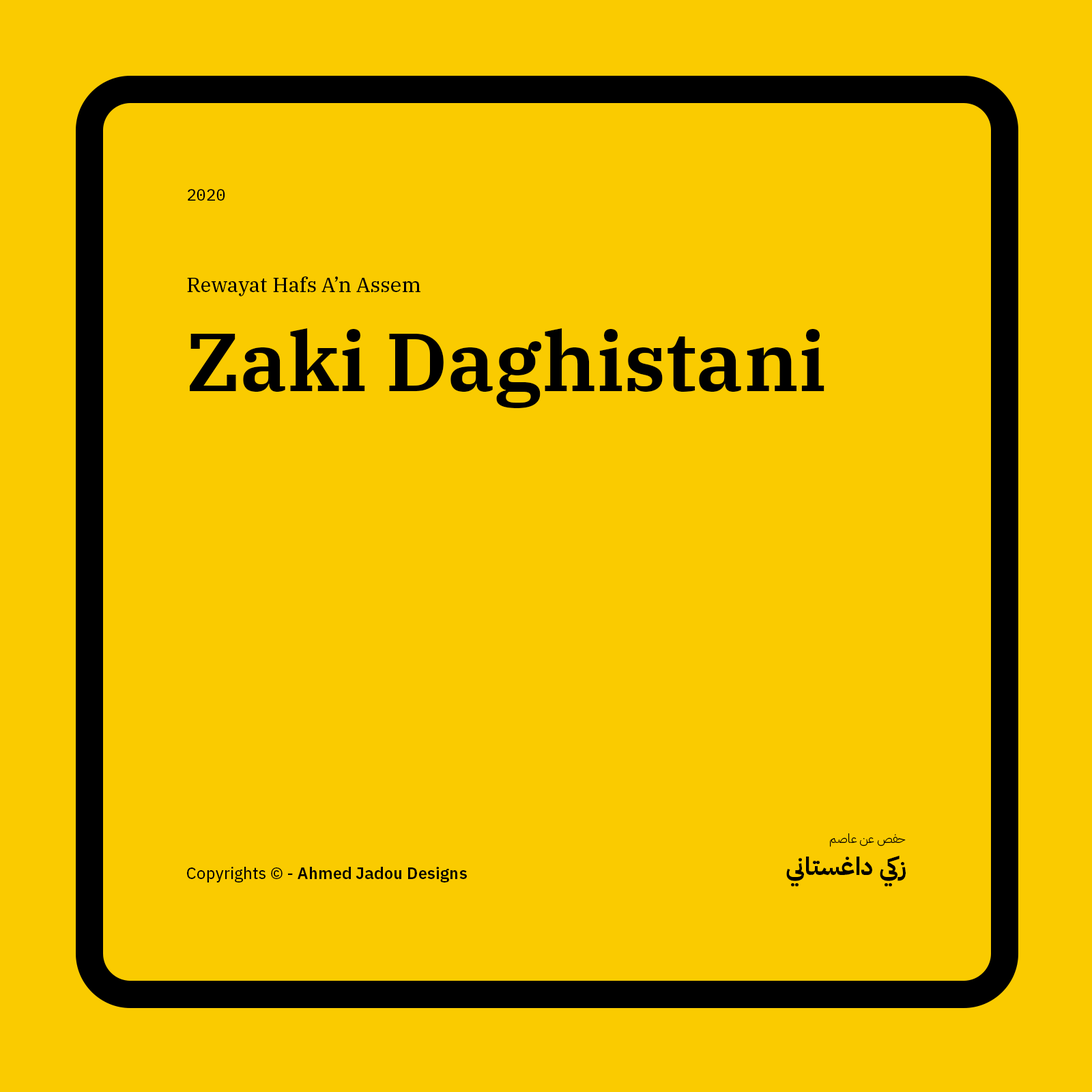
<style>
.page{position:relative;width:1092px;height:1092px;background:#facb00}
.page>*{position:absolute;margin:0}
.t1{font:16.4px "IBMPlexMono-Text";color:#000000}
.t2{font:20.5px "IBMPlexSerif-Text";color:#000000}
.t3{font:81.9px "IBMPlexSerif-SemiBold";color:#000000}
.t4{font:12.3px "IBMPlexArabic-Light";color:#000000}
.t5{font:24.6px "IBMPlexArabic-Bold";color:#000000}
.t6{font:16.4px "IBMPlexSans-SemiBold";color:#000000}
.t7{font:16.4px "IBMPlexSans-Text";color:#000000}
</style>
<div class="page">
<p class="t1" style="left:188px;top:189px;width:37px;height:12px">2020</p>
<p class="t2" style="left:187px;top:276px;width:233px;height:20px">Rewayat Hafs A’n Assem</p>
<p class="t3" style="left:190px;top:328px;width:634px;height:80px">Zaki Daghistani</p>
<p class="t4" style="left:830px;top:833px;width:76px;height:14px">حفص عن عاصم</p>
<p class="t5" style="left:786px;top:855px;width:120px;height:32px">زكي داغستاني</p>
<p class="t6" style="left:187px;top:867px;width:280px;height:15px"><span class="t7">Copyrights © - </span>Ahmed Jadou Designs</p>
</div>
